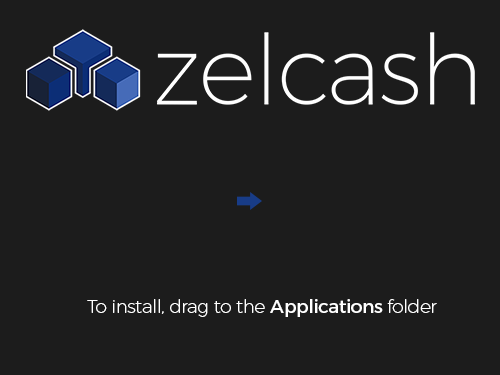
<style>
.page{position:relative;width:500px;height:375px;background:#1c1c1c}
.page>*{position:absolute;margin:0}
.t1{font:18.7px "TruenoUltLt";letter-spacing:-0.02em;color:#ffffff}
.t2{font:18.7px "TruenoRg";letter-spacing:-0.02em;color:#ffffff}
</style>
<div class="page">
<p class="t1" style="left:87px;top:299px;width:350px;height:18px">To install, drag to the <span class="t2">Applications </span>folder</p>
</div>
